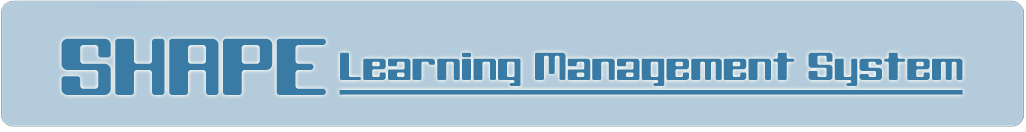
<style>
.page{position:relative;width:1026px;height:132px;background:#b4cbdb}
.page>*{position:absolute;margin:0}
.t1{font:78px "BlackWolf";color:#3a7ba6}
.t2{font:38px "BlackWolf";color:#3a7ba6}
</style>
<div class="page">
<p class="t1" style="left:61px;top:38px;width:265px;height:57px">SHAPE</p>
<p class="t2" style="left:340px;top:52px;width:623px;height:34px">Learning Management System</p>
</div>
